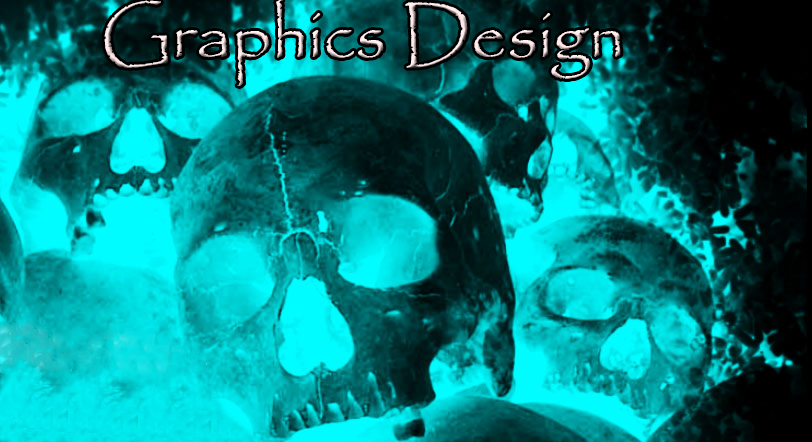
<style>
.page{position:relative;width:812px;height:442px}
.page>*{position:absolute;margin:0}
.t1{font:70px "Papyrus-Regular"}
</style>
<div class="page">
<p class="t1" style="left:104px;top:0px;width:517px;height:86px">Graphics Design</p>
</div>
